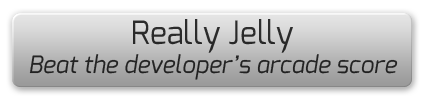
<style>
.page{position:relative;width:425px;height:100px}
.page>*{position:absolute;margin:0}
.t1{font:24px "Exo-Italic";color:#252525}
.t2{font:32px "Exo-Regular";color:#252525}
</style>
<div class="page">
<p class="t1" style="left:29px;top:19px;width:369px;height:61px;text-align:center"><span class="t2">Really Jelly<br></span>Beat the developer’s arcade score</p>
</div>
